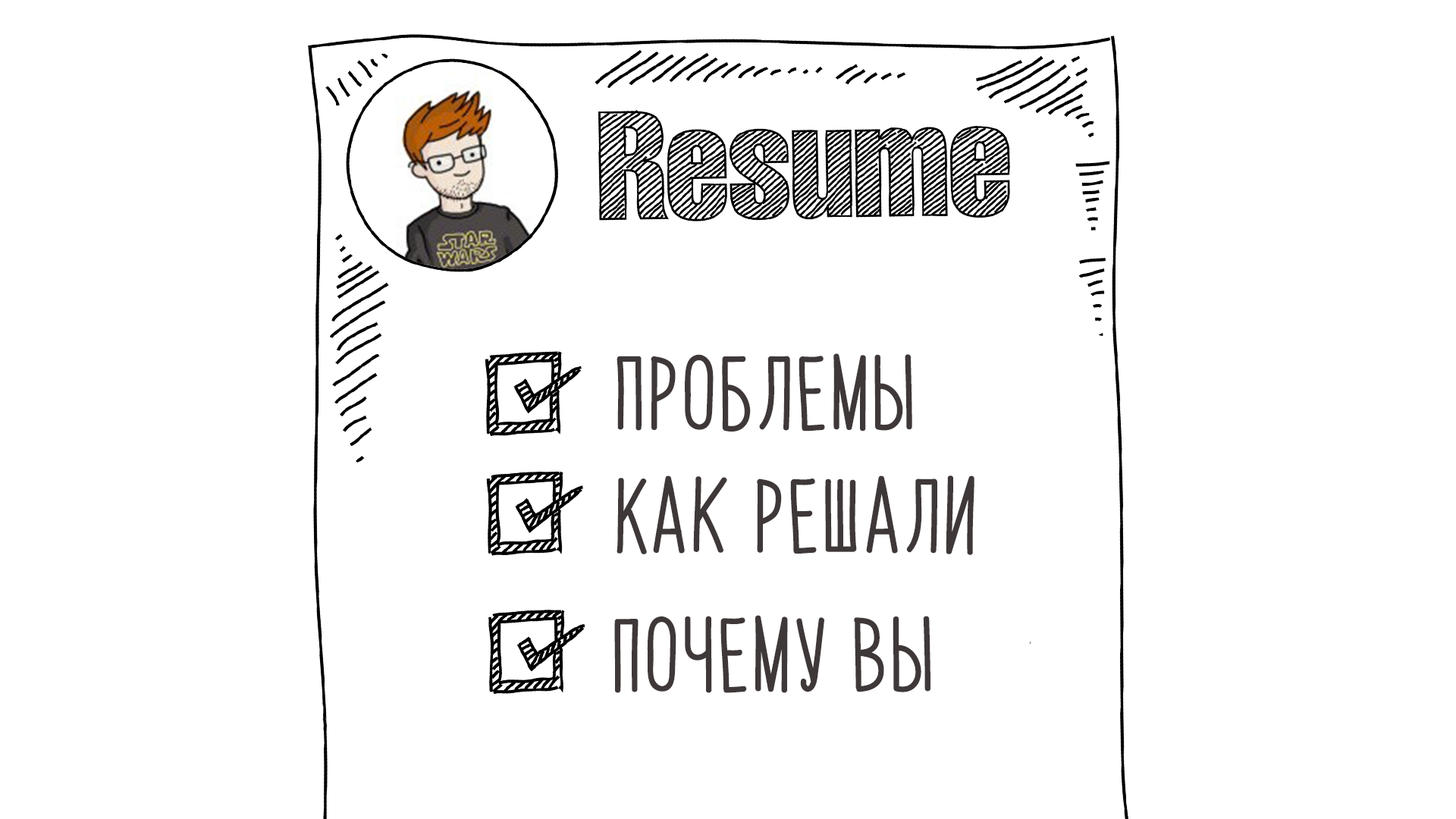
<style>
.page{position:relative;width:1456px;height:819px;background:#ffffff}
.page>*{position:absolute;margin:0}
.t1{font:63.7px "PapayaSunrise";color:#3f3838;font-weight:bold}
</style>
<div class="page">
<p class="t1" style="left:617px;top:353px;width:295px;height:79px">Проблемы</p>
<p class="t1" style="left:617px;top:475px;width:357px;height:80px">Как решали</p>
<p class="t1" style="left:614px;top:615px;width:316px;height:78px">почему вы</p>
</div>
